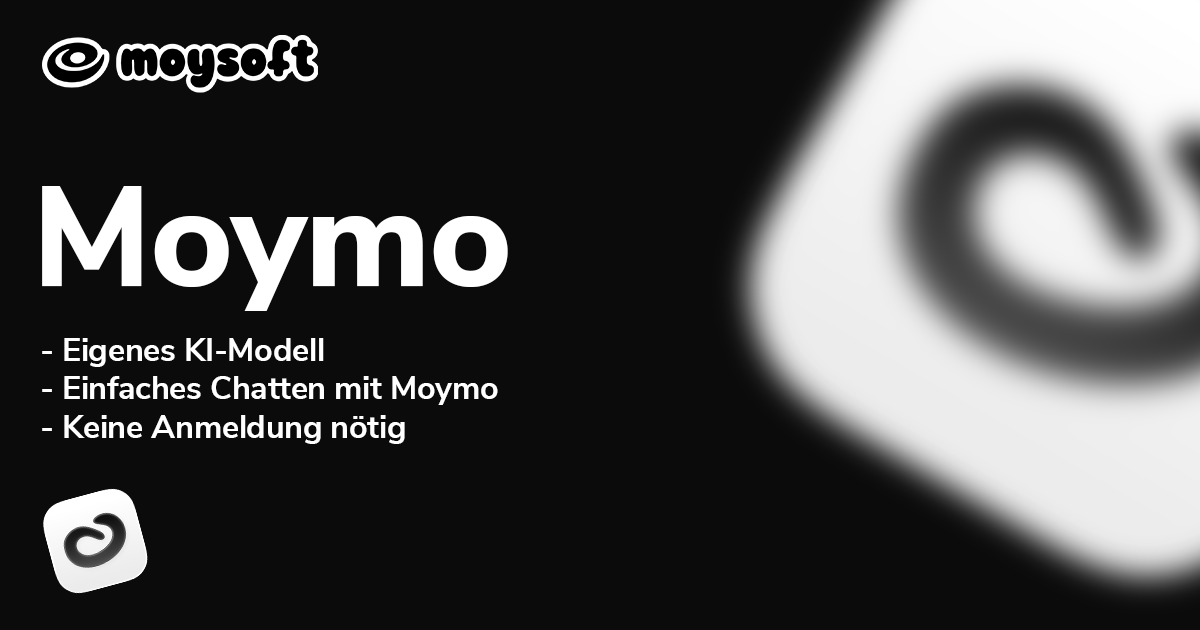
<style>
.page{position:relative;width:1200px;height:630px;background:#0b0b0b}
.page>*{position:absolute;margin:0}
.t1{font:141.8px "NunitoSans-ExtraBold";letter-spacing:-0.01em;color:#ffffff}
.t2{font:32.4px "NunitoSans-Bold";letter-spacing:-0.01em;color:#ffffff}
</style>
<div class="page">
<p class="t1" style="left:42px;top:186px;width:466px;height:125px">Moymo</p>
<p class="t2" style="left:42px;top:338px;width:456px;height:106px">Eigenes KI-Modell<br>Einfaches Chatten mit Moymo<br>Keine Anmeldung nötig</p>
</div>
